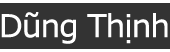
<style>
.page{position:relative;width:170px;height:52px;background:#333333}
.page>*{position:absolute;margin:0}
.t1{font:31.5px "Verdana";letter-spacing:-0.04em;color:#ffffff}
</style>
<div class="page">
<p class="t1" style="left:1px;top:12px;width:167px;height:32px">Dũng Thịnh</p>
</div>
